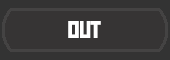
<style>
.page{position:relative;width:170px;height:60px;background:#363434}
.page>*{position:absolute;margin:0}
.t1{font:24px "PixelCyr-Normal";color:#ffffff}
</style>
<div class="page">
<p class="t1" style="left:68px;top:21px;width:33px;height:17px">OUT</p>
</div>
